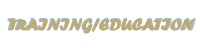
<style>
.page{position:relative;width:200px;height:50px;background:#ffffff}
.page>*{position:absolute;margin:0}
.t1{font:16.7px "ForteMT";letter-spacing:-0.01em;text-transform:uppercase;font-weight:bold}
</style>
<div class="page">
<p class="t1" style="left:7px;top:18px;width:189px;height:16px">Training/Education</p>
</div>
